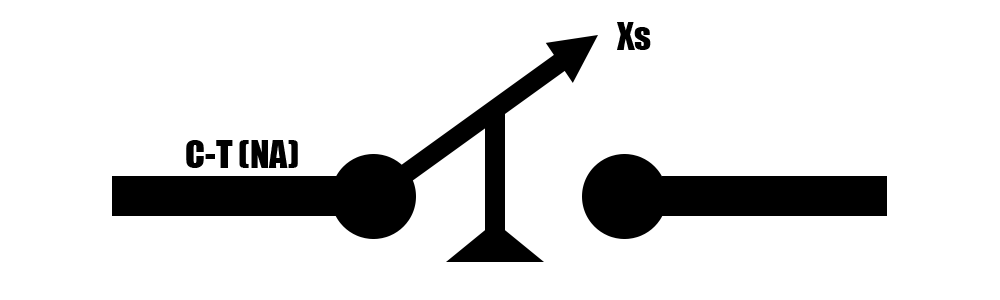
<style>
.page{position:relative;width:1000px;height:300px;background:#ffffff}
.page>*{position:absolute;margin:0}
.t1{font:36px "Impact";color:#000000}
</style>
<div class="page">
<p class="t1" style="left:617px;top:22px;width:34px;height:28px">Xs</p>
<p class="t1" style="left:186px;top:140px;width:112px;height:28px">C-T (NA)</p>
</div>
